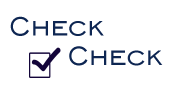
<style>
.page{position:relative;width:170px;height:100px;background:#ffffff}
.page>*{position:absolute;margin:0}
.t1{font:35px "EngraversGothicBT-Regular";color:#0e2652}
</style>
<div class="page">
<p class="t1" style="left:10px;top:16px;width:94px;height:20px">Check</p>
<p class="t1" style="left:69px;top:46px;width:94px;height:20px">Check</p>
</div>
